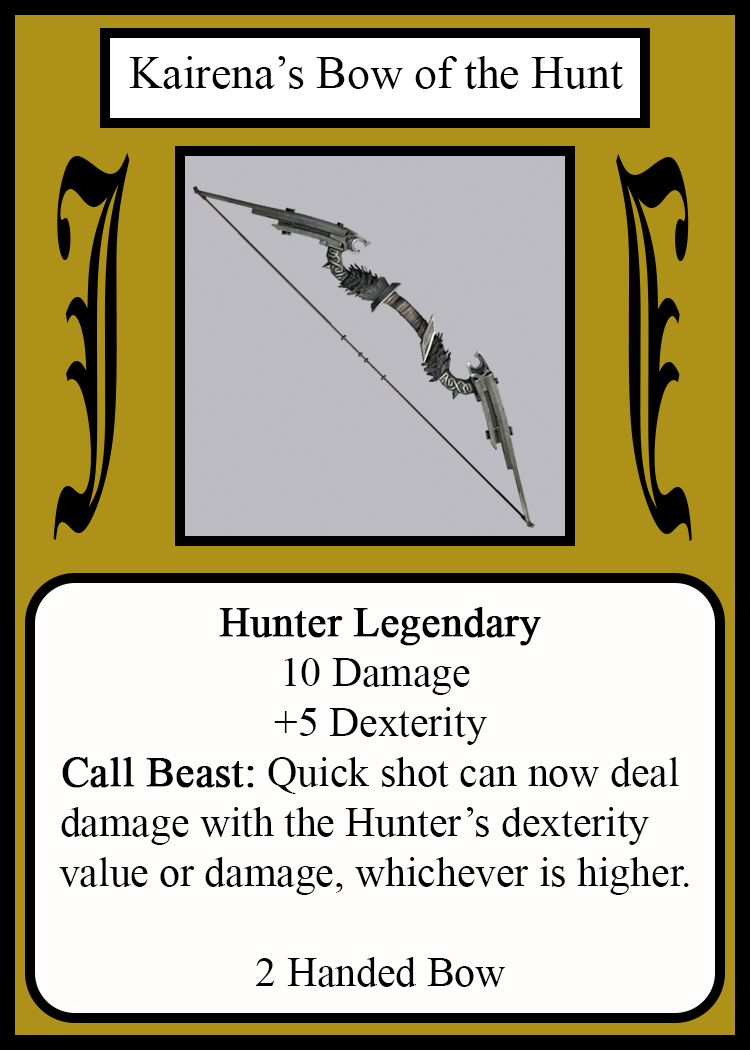
<style>
.page{position:relative;width:750px;height:1050px;background:#fffcfc}
.page>*{position:absolute;margin:0}
.t1{font:45.8px "TimesNewRomanPSMT";color:#010101}
.t2{font:450.1px "OldEnglishTextMT";color:#000000;scale:0.26 1}
.t3{font:449.7px "OldEnglishTextMT";color:#000000;scale:0.26 1}
.t4{font:41.7px "TimesNewRomanPSMT";color:#000000}
.t5{font:41.7px "TimesNewRomanPSMT";color:#000000;font-weight:bold}
</style>
<div class="page">
<p class="t1" style="left:129px;top:56px;width:494px;height:33px">Kairena’s Bow of the Hunt</p>
<p class="t2" style="left:53px;top:153px;width:77px;height:387px">J</p>
<p class="t3" style="left:616px;top:154px;width:76px;height:387px;rotate:180deg">J</p>
<p class="t4" style="left:59px;top:607px;width:630px;height:380px;text-align:center"><span class="t5">Hunter Legendary<br></span>10 Damage<br> +5 Dexterity<br><span class="t5">Call Beast:</span> Quick shot can now deal <br>damage with the Hunter’s dexterity    <br>value or damage, whichever is higher.<br><br> 2 Handed Bow</p>
</div>
